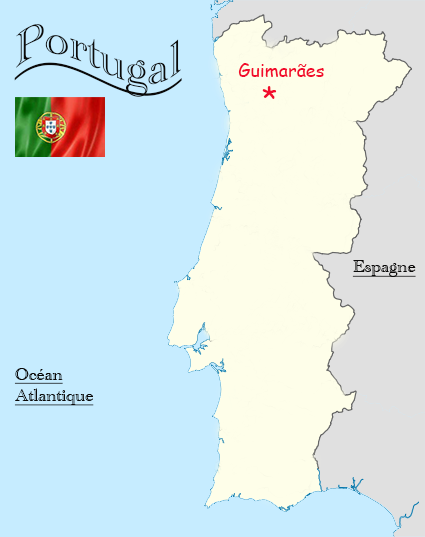
<style>
.page{position:relative;width:425px;height:537px;background:#c6ecff}
.page>*{position:absolute;margin:0}
.t1{font:48px "AcademyEngravedLetPlain";color:#0a0908;text-decoration:underline}
.t2{font:18px "ComicSansMS";color:#f20c2d}
.t3{font:30px "ComicSansMS";color:#f20c2d}
.t4{font:18px "AcademyEngravedLetPlain";color:#0a0908;text-decoration:underline}
</style>
<div class="page">
<p class="t1" style="left:14px;top:24px;width:168px;height:73px">Portugal</p>
<p class="t2" style="left:238px;top:63px;width:86px;height:14px">Guimarães</p>
<p class="t3" style="left:262px;top:86px;width:15px;height:13px">*</p>
<p class="t4" style="left:352px;top:260px;width:64px;height:17px">Espagne</p>
<p class="t4" style="left:14px;top:368px;width:80px;height:38px">Océan<br>Atlantique</p>
</div>
